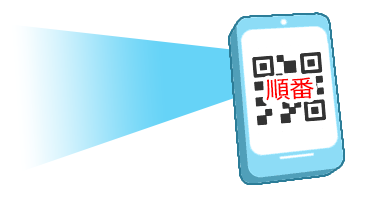
<style>
.page{position:relative;width:373px;height:199px;background:#ffffff}
.page>*{position:absolute;margin:0}
.t1{font:24px "Meiryo";color:#ff0000}
</style>
<div class="page">
<p class="t1" style="left:266px;top:77px;width:48px;height:24px;rotate:-3deg">順番</p>
</div>
